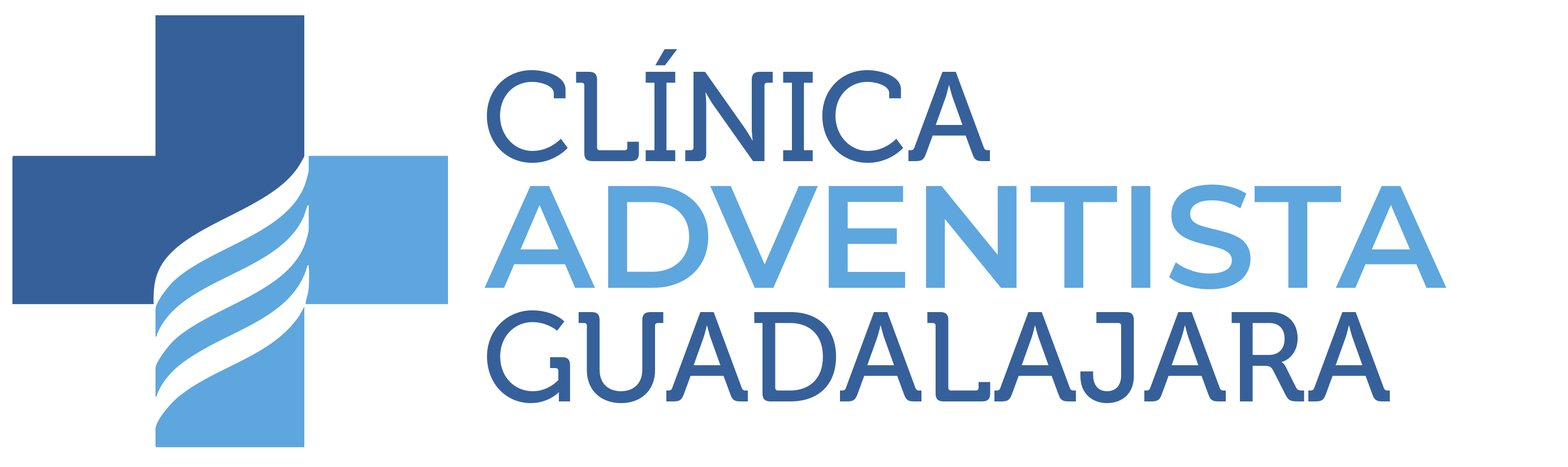
<style>
.page{position:relative;width:1568px;height:467px;background:#ffffff}
.page>*{position:absolute;margin:0}
.t1{font:126.9px "Museo-500";color:#366099;text-transform:uppercase}
.t2{font:145.4px "Montserrat-SemiBold";color:#5ea6de;text-transform:uppercase}
</style>
<div class="page">
<p class="t1" style="left:486px;top:49px;width:504px;height:114px">CLÍNICA</p>
<p class="t2" style="left:484px;top:184px;width:962px;height:106px">adventista</p>
<p class="t1" style="left:487px;top:310px;width:903px;height:93px">Guadalajara</p>
</div>
